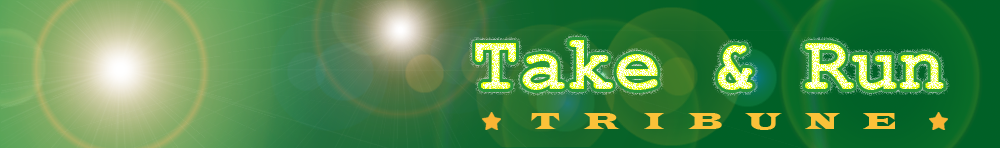
<style>
.page{position:relative;width:1000px;height:148px}
.page>*{position:absolute;margin:0}
.t1{font:79px "CourierNewPS-BoldMT"}
.t2{font:24px "LatinWide";letter-spacing:1em;color:#fbc239}
</style>
<div class="page">
<p class="t1" style="left:475px;top:40px;width:469px;height:50px">Take &amp; Run</p>
<p class="t2" style="left:531px;top:113px;width:364px;height:17px">TRIBUNE</p>
</div>
